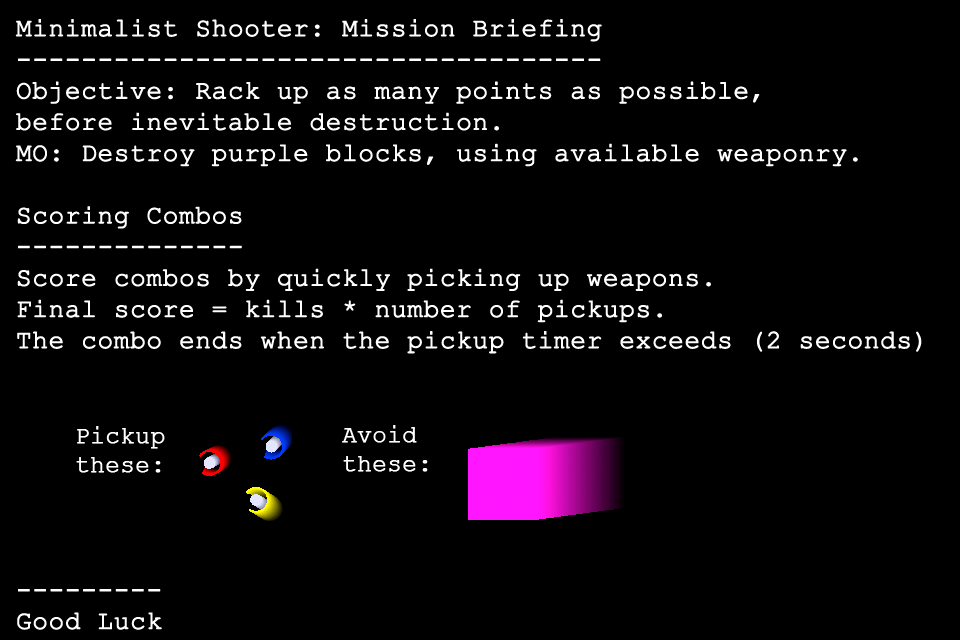
<style>
.page{position:relative;width:960px;height:640px;background:#000000}
.page>*{position:absolute;margin:0}
.t1{font:26px "CourierNewPSMT";color:#ffffff;font-weight:bold}
.t2{font:24px "CourierNewPSMT";color:#ffffff;font-weight:bold}
</style>
<div class="page">
<p class="t1" style="left:15px;top:19px;width:907px;height:611px">Minimalist Shooter: Mission Briefing<br>------------------------------------<br>Objective: Rack up as many points as possible,<br>before inevitable destruction.<br>MO: Destroy purple blocks, using available weaponry.<br><br>Scoring Combos<br>--------------<br>Score combos by quickly picking up weapons.<br>Final score = kills * number of pickups.<br>The combo ends when the pickup timer exceeds (2 seconds)<br><br><br><br><br><br><br><br>---------<br>Good Luck</p>
<p class="t2" style="left:342px;top:425px;width:86px;height:47px">Avoid<br>these:</p>
<p class="t2" style="left:76px;top:426px;width:89px;height:47px">Pickup<br>these:</p>
</div>
